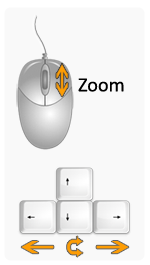
<style>
.page{position:relative;width:150px;height:265px;background:#f9f9f9}
.page>*{position:absolute;margin:0}
.t1{font:20.2px "Calibri";color:#000000}
</style>
<div class="page">
<p class="t1" style="left:78px;top:78px;width:46px;height:14px">Zoom</p>
</div>
